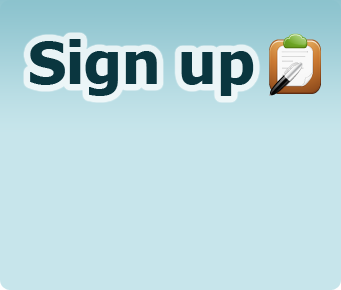
<style>
.page{position:relative;width:341px;height:290px;background:#c7e5eb}
.page>*{position:absolute;margin:0}
.t1{font:57.8px "Tahoma-Bold";color:#0a363f;scale:1.04 1}
</style>
<div class="page">
<p class="t1" style="left:30px;top:39px;width:224px;height:57px">Sign up</p>
</div>
